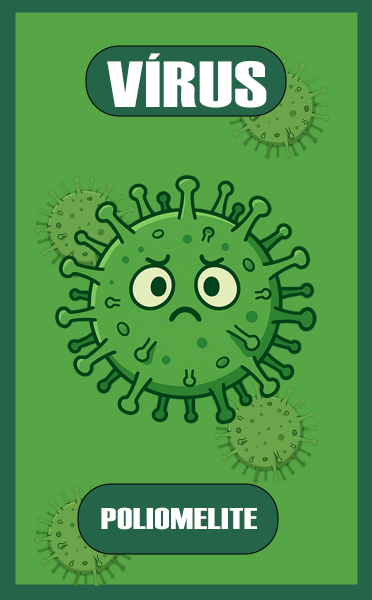
<style>
.page{position:relative;width:372px;height:600px;background:#56a645}
.page>*{position:absolute;margin:0}
.t1{font:65px "Haettenschweiler";letter-spacing:0.015em;color:#ffffff;scale:1.35 1}
.t2{font:30px "Haettenschweiler";letter-spacing:0.015em;color:#ffffff;scale:1.35 1}
</style>
<div class="page">
<p class="t1" style="left:107px;top:53px;width:160px;height:55px">VÍRUS</p>
<p class="t2" style="left:101px;top:507px;width:156px;height:23px">POLIOMELITE</p>
</div>
